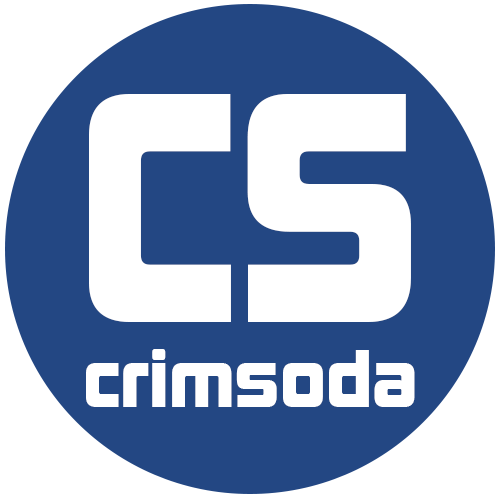
<style>
.page{position:relative;width:500px;height:500px;background:#234783}
.page>*{position:absolute;margin:0}
.t1{font:300px "KimberleyCYR-Black";color:#ffffff}
.t2{font:75px "KimberleyCYR-Black";color:#ffffff}
</style>
<div class="page">
<p class="t1" style="left:89px;top:94px;width:322px;height:228px">CS</p>
<p class="t2" style="left:86px;top:349px;width:329px;height:58px">crimsoda</p>
</div>
